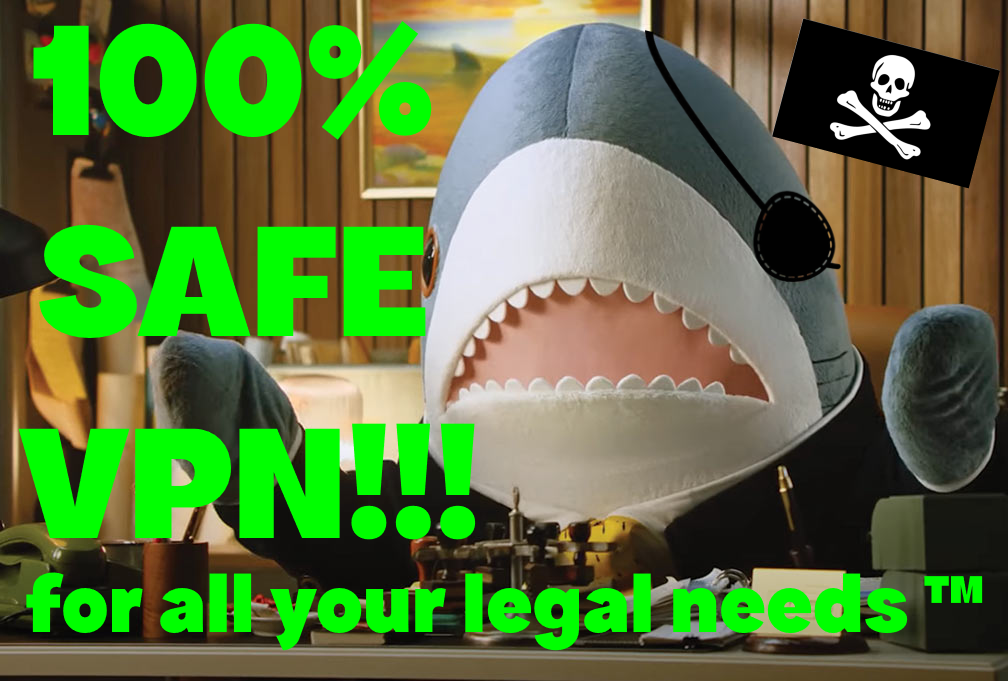
<style>
.page{position:relative;width:1008px;height:681px}
.page>*{position:absolute;margin:0}
.t1{font:168.1px "ApfelGrotezk-Satt";color:#00ff00}
.t2{font:86px "ApfelGrotezk-Satt";color:#00ff00}
</style>
<div class="page">
<p class="t1" style="left:18px;top:21px;width:458px;height:519px;text-align:center">100% <br>SAFE <br>VPN!!!</p>
<p class="t2" style="left:26px;top:569px;width:957px;height:82px">for all your legal needs ™</p>
</div>
